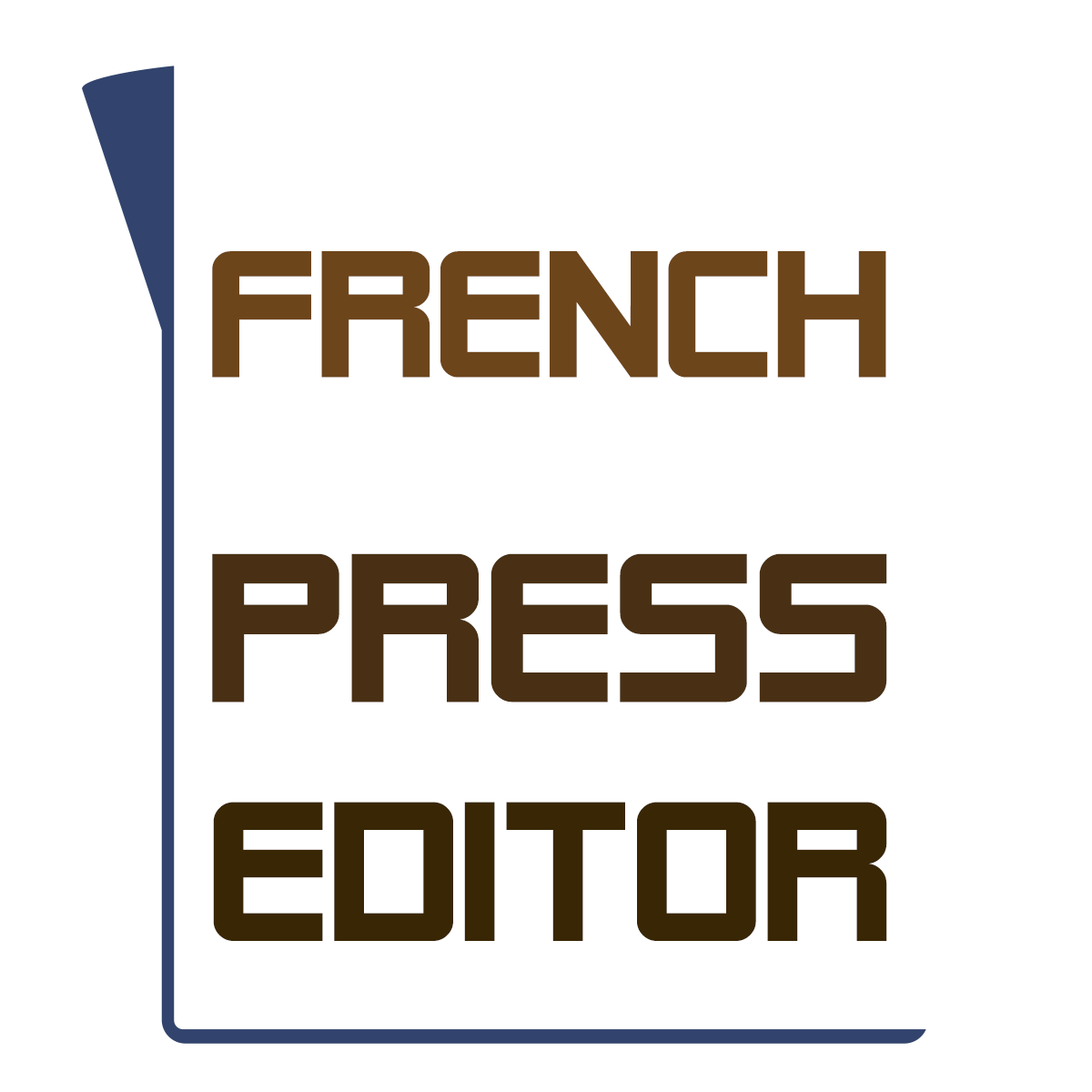
<style>
.page{position:relative;width:1092px;height:1092px;background:#ffffff}
.page>*{position:absolute;margin:0}
.t1{font:179.6px "AlienEncountersSolid";color:#6d451b}
.t2{font:211.3px "AlienEncountersSolid";color:#493014}
.t3{font:197.8px "AlienEncountersSolid";color:#392605}
</style>
<div class="page">
<p class="t1" style="left:212px;top:251px;width:674px;height:127px">french</p>
<p class="t2" style="left:212px;top:553px;width:675px;height:150px">press</p>
<p class="t3" style="left:213px;top:802px;width:674px;height:139px">editor</p>
</div>
